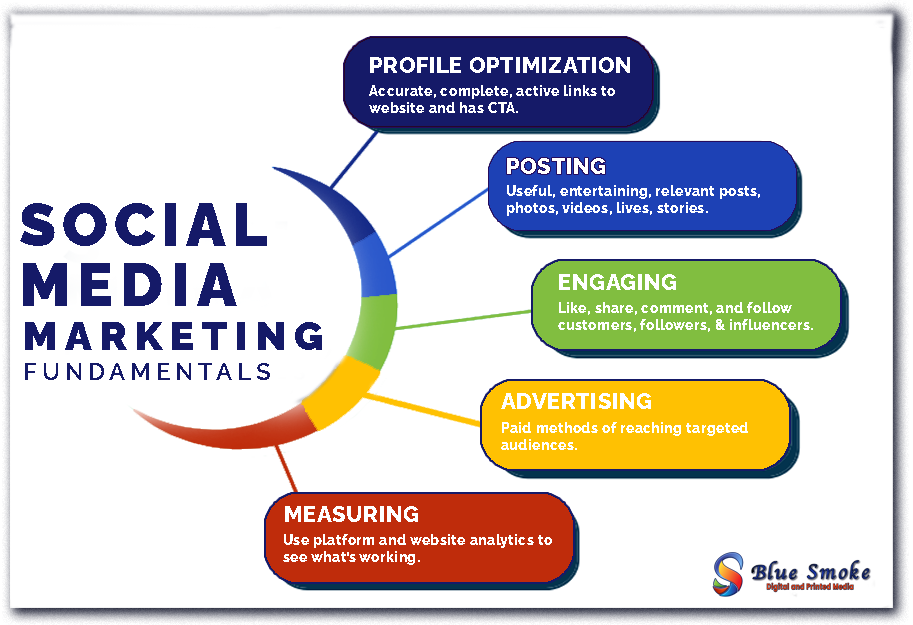
<style>
.page{position:relative;width:913px;height:625px;background:#ffffff}
.page>*{position:absolute;margin:0}
.t1{font:22px "RalewayRoman-ExtraBold";letter-spacing:0.025em;color:#ffffff;font-weight:bold}
.t2{font:14px "RalewayRoman-ExtraBold";letter-spacing:0.025em;color:#ffffff;font-weight:bold}
.t3{font:60px/60px "RalewayRoman-Black";letter-spacing:0.1em;color:#151a68;font-weight:bold}
.t4{font:60px/60px "RalewayRoman-Black";letter-spacing:0.12em;color:#151a68;font-weight:bold}
.t5{font:24px/30px "RalewayRoman-SemiBold";letter-spacing:0.2em;color:#151a68;font-weight:bold}
.t6{font:40px/60px "RalewayRoman-Black";letter-spacing:0.2em;color:#151a68;font-weight:bold}
</style>
<div class="page">
<p class="t1" style="left:370px;top:57px;width:260px;height:16px">PROFILE OPTIMIZATION</p>
<p class="t2" style="left:369px;top:85px;width:246px;height:28px">Accurate, complete, active links to<br>website and has CTA.</p>
<p class="t1" style="left:507px;top:158px;width:98px;height:16px">POSTING</p>
<p class="t2" style="left:507px;top:185px;width:253px;height:31px">Useful, entertaining, relevant posts,<br>photos, videos, lives, stories.</p>
<p class="t3" style="left:20px;top:203px;width:247px;height:103px">SOCIAL<br><span class="t4">MEDIA</span></p>
<p class="t1" style="left:559px;top:274px;width:117px;height:16px">ENGAGING</p>
<p class="t2" style="left:558px;top:302px;width:255px;height:30px">Like, share, comment, and follow<br>customers, followers, &amp; influencers.</p>
<p class="t5" style="left:25px;top:322px;width:297px;height:58px"><span class="t6">MARKETING<br></span>FUNDAMENTALS</p>
<p class="t1" style="left:501px;top:393px;width:150px;height:16px">ADVERTISING</p>
<p class="t2" style="left:501px;top:422px;width:247px;height:28px">Paid methods of reaching targeted<br>audiences.</p>
<p class="t1" style="left:285px;top:506px;width:133px;height:16px">MEASURING</p>
<p class="t2" style="left:283px;top:534px;width:269px;height:31px">Use platform and website analytics to<br>see what’s working.</p>
</div>
